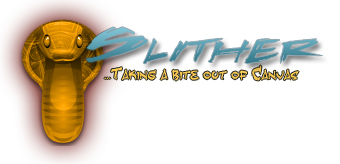
<style>
.page{position:relative;width:340px;height:164px;background:#ffffff}
.page>*{position:absolute;margin:0}
.t1{font:56.9px "DeathRattleBB";font-variant:small-caps;scale:2.25 1}
.t2{font:24px "Fearless";color:#fdc745;font-variant:small-caps;scale:0.9 1}
.t3{font:10px "Fearless";color:#fdc745;font-variant:small-caps;scale:0.9 1}
</style>
<div class="page">
<p class="t1" style="left:85px;top:26px;width:238px;height:38px">Slither</p>
<p class="t2" style="left:104px;top:65px;width:195px;height:16px"><span class="t3">...</span>Taking a bite out of Canvas</p>
</div>
